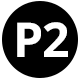
<style>
.page{position:relative;width:80px;height:80px;background:#000000}
.page>*{position:absolute;margin:0}
.t1{font:48px "OpenSans-Bold";letter-spacing:-0.025em;color:#ffffff}
</style>
<div class="page">
<p class="t1" style="left:17px;top:22px;width:51px;height:35px">P2</p>
</div>
